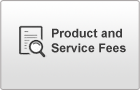
<style>
.page{position:relative;width:140px;height:90px}
.page>*{position:absolute;margin:0}
.t1{font:12.3px "Arial-BoldMT";color:#3d3c3c}
</style>
<div class="page">
<p class="t1" style="left:51px;top:28px;width:75px;height:25px">Product and <br>Service Fees</p>
</div>
